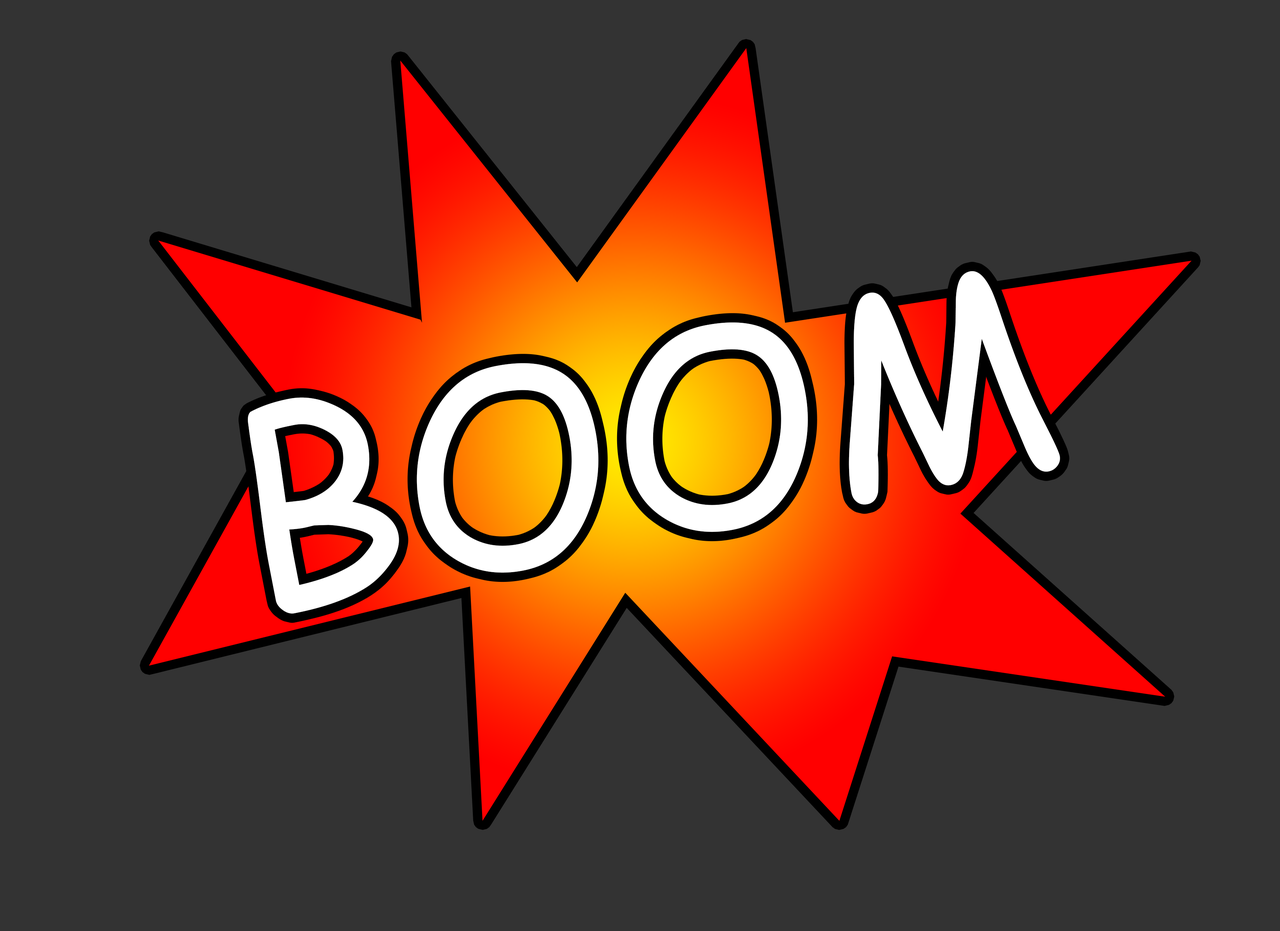
<style>
.page{position:relative;width:1280px;height:931px;background:#333333}
.page>*{position:absolute;margin:0}
.t1{font:267.7px "ComicSansMS";color:#ffffff}
</style>
<div class="page">
<p class="t1" style="left:248px;top:271px;width:812px;height:343px;rotate:-11deg">BOOM</p>
</div>
